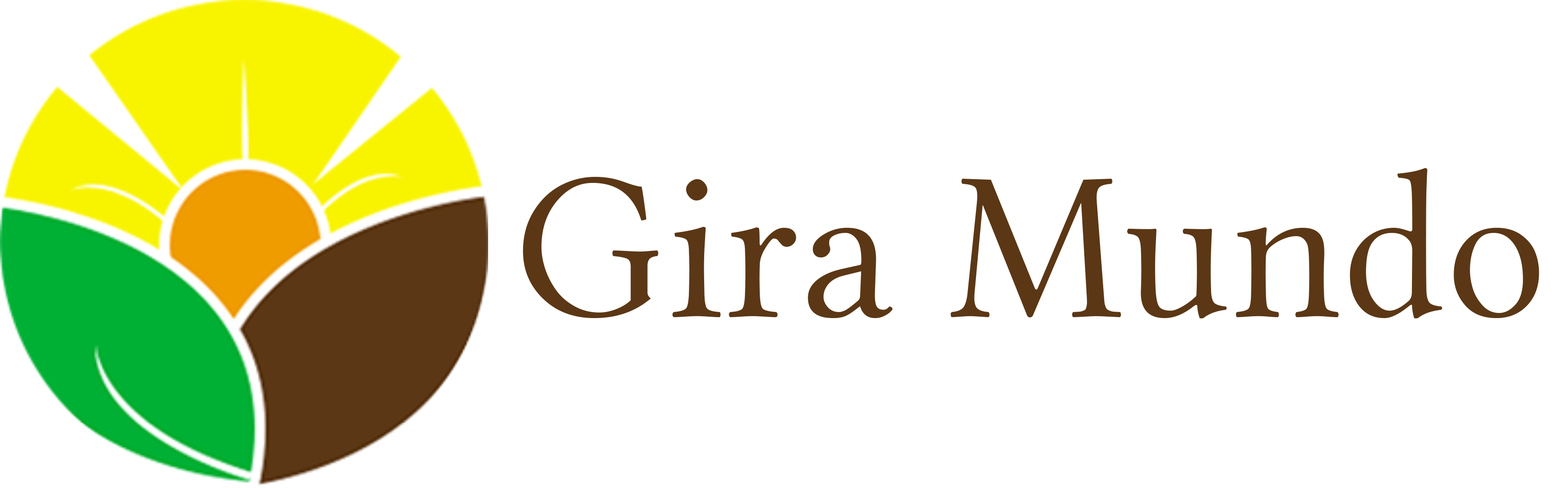
<style>
.page{position:relative;width:1568px;height:488px;background:#ffffff}
.page>*{position:absolute;margin:0}
.t1{font:212.2px "LinLibertineDisplay";color:#5b3715}
</style>
<div class="page">
<p class="t1" style="left:523px;top:168px;width:1016px;height:151px">Gira Mundo</p>
</div>
